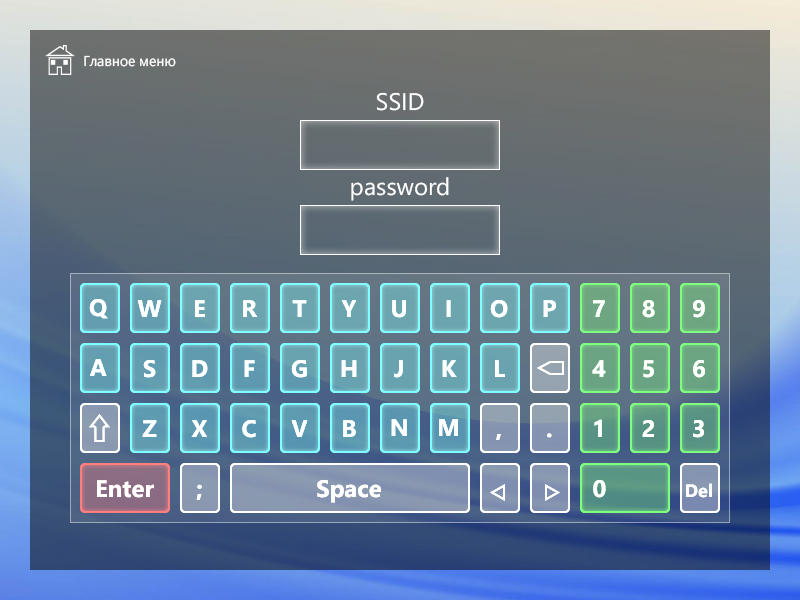
<style>
.page{position:relative;width:800px;height:600px}
.page>*{position:absolute;margin:0}
.t1{font:14.2px "SegoeUI";color:#ffffff}
.t2{font:24px "SegoeUI";color:#ffffff}
.t3{font:24px "SegoeUI-Bold";color:#ffffff}
.t4{font:18px "SegoeUI-Bold";color:#ffffff}
</style>
<div class="page">
<p class="t1" style="left:84px;top:55px;width:92px;height:12px">Главное меню</p>
<p class="t2" style="left:376px;top:92px;width:48px;height:19px">SSID</p>
<p class="t2" style="left:351px;top:177px;width:98px;height:24px">password</p>
<p class="t3" style="left:89px;top:299px;width:19px;height:20px">Q</p>
<p class="t3" style="left:89px;top:299px;width:19px;height:20px">Q</p>
<p class="t3" style="left:137px;top:300px;width:25px;height:17px">W</p>
<p class="t3" style="left:137px;top:300px;width:25px;height:17px">W</p>
<p class="t3" style="left:195px;top:300px;width:10px;height:17px">E</p>
<p class="t3" style="left:195px;top:300px;width:10px;height:17px">E</p>
<p class="t3" style="left:243px;top:300px;width:15px;height:17px">R</p>
<p class="t3" style="left:243px;top:300px;width:15px;height:17px">R</p>
<p class="t3" style="left:292px;top:300px;width:15px;height:17px">T</p>
<p class="t3" style="left:292px;top:300px;width:15px;height:17px">T</p>
<p class="t3" style="left:341px;top:300px;width:16px;height:17px">Y</p>
<p class="t3" style="left:341px;top:300px;width:16px;height:17px">Y</p>
<p class="t3" style="left:392px;top:300px;width:14px;height:18px">U</p>
<p class="t3" style="left:392px;top:300px;width:14px;height:18px">U</p>
<p class="t3" style="left:446px;top:300px;width:5px;height:17px">I</p>
<p class="t3" style="left:446px;top:300px;width:5px;height:17px">I</p>
<p class="t3" style="left:490px;top:300px;width:18px;height:18px">O</p>
<p class="t3" style="left:490px;top:300px;width:18px;height:18px">O</p>
<p class="t3" style="left:543px;top:300px;width:13px;height:17px">P</p>
<p class="t3" style="left:543px;top:300px;width:13px;height:17px">P</p>
<p class="t3" style="left:593px;top:300px;width:12px;height:17px">7</p>
<p class="t3" style="left:593px;top:300px;width:12px;height:17px">7</p>
<p class="t3" style="left:642px;top:300px;width:13px;height:18px">8</p>
<p class="t3" style="left:642px;top:300px;width:13px;height:18px">8</p>
<p class="t3" style="left:693px;top:300px;width:12px;height:18px">9</p>
<p class="t3" style="left:693px;top:300px;width:12px;height:18px">9</p>
<p class="t3" style="left:90px;top:359px;width:17px;height:17px">A</p>
<p class="t3" style="left:90px;top:359px;width:17px;height:17px">A</p>
<p class="t3" style="left:143px;top:360px;width:13px;height:18px">S</p>
<p class="t3" style="left:143px;top:360px;width:13px;height:18px">S</p>
<p class="t3" style="left:192px;top:360px;width:16px;height:17px">D</p>
<p class="t3" style="left:192px;top:360px;width:16px;height:17px">D</p>
<p class="t3" style="left:244px;top:360px;width:11px;height:17px">F</p>
<p class="t3" style="left:244px;top:360px;width:11px;height:17px">F</p>
<p class="t3" style="left:291px;top:360px;width:16px;height:18px">G</p>
<p class="t3" style="left:291px;top:360px;width:16px;height:18px">G</p>
<p class="t3" style="left:341px;top:360px;width:16px;height:17px">H</p>
<p class="t3" style="left:341px;top:360px;width:16px;height:17px">H</p>
<p class="t3" style="left:394px;top:360px;width:9px;height:18px">J</p>
<p class="t3" style="left:394px;top:360px;width:9px;height:18px">J</p>
<p class="t3" style="left:442px;top:360px;width:15px;height:17px">K</p>
<p class="t3" style="left:442px;top:360px;width:15px;height:17px">K</p>
<p class="t3" style="left:495px;top:360px;width:10px;height:17px">L</p>
<p class="t3" style="left:495px;top:360px;width:10px;height:17px">L</p>
<p class="t3" style="left:592px;top:360px;width:14px;height:17px">4</p>
<p class="t3" style="left:592px;top:360px;width:14px;height:17px">4</p>
<p class="t3" style="left:643px;top:360px;width:11px;height:18px">5</p>
<p class="t3" style="left:643px;top:360px;width:11px;height:18px">5</p>
<p class="t3" style="left:693px;top:360px;width:12px;height:18px">6</p>
<p class="t3" style="left:693px;top:360px;width:12px;height:18px">6</p>
<p class="t3" style="left:142px;top:420px;width:15px;height:17px">Z</p>
<p class="t3" style="left:142px;top:420px;width:15px;height:17px">Z</p>
<p class="t3" style="left:191px;top:420px;width:16px;height:17px">X</p>
<p class="t3" style="left:191px;top:420px;width:16px;height:17px">X</p>
<p class="t3" style="left:242px;top:420px;width:14px;height:18px">C</p>
<p class="t3" style="left:242px;top:420px;width:14px;height:18px">C</p>
<p class="t3" style="left:291px;top:420px;width:17px;height:17px">V</p>
<p class="t3" style="left:291px;top:420px;width:17px;height:17px">V</p>
<p class="t3" style="left:343px;top:420px;width:13px;height:17px">B</p>
<p class="t3" style="left:343px;top:420px;width:13px;height:17px">B</p>
<p class="t3" style="left:391px;top:419px;width:16px;height:17px">N</p>
<p class="t3" style="left:391px;top:419px;width:16px;height:17px">N</p>
<p class="t3" style="left:439px;top:419px;width:19px;height:17px">M</p>
<p class="t3" style="left:439px;top:419px;width:19px;height:17px">M</p>
<p class="t3" style="left:594px;top:419px;width:8px;height:18px">1</p>
<p class="t3" style="left:594px;top:419px;width:8px;height:18px">1</p>
<p class="t3" style="left:642px;top:420px;width:12px;height:17px">2</p>
<p class="t3" style="left:642px;top:420px;width:12px;height:17px">2</p>
<p class="t3" style="left:693px;top:420px;width:11px;height:18px">3</p>
<p class="t3" style="left:693px;top:420px;width:11px;height:18px">3</p>
<p class="t3" style="left:496px;top:434px;width:5px;height:6px">,</p>
<p class="t3" style="left:496px;top:434px;width:5px;height:6px">,</p>
<p class="t3" style="left:547px;top:433px;width:5px;height:5px">.</p>
<p class="t3" style="left:547px;top:433px;width:5px;height:5px">.</p>
<p class="t3" style="left:97px;top:480px;width:57px;height:18px">Enter</p>
<p class="t3" style="left:97px;top:480px;width:57px;height:18px">Enter</p>
<p class="t3" style="left:196px;top:484px;width:6px;height:16px">;</p>
<p class="t3" style="left:196px;top:484px;width:6px;height:16px">;</p>
<p class="t3" style="left:317px;top:480px;width:64px;height:23px">Space</p>
<p class="t3" style="left:317px;top:480px;width:64px;height:23px">Space</p>
<p class="t3" style="left:593px;top:480px;width:13px;height:18px">0</p>
<p class="t3" style="left:593px;top:480px;width:13px;height:18px">0</p>
<p class="t4" style="left:686px;top:483px;width:26px;height:15px">Del</p>
<p class="t4" style="left:686px;top:483px;width:26px;height:15px">Del</p>
</div>
